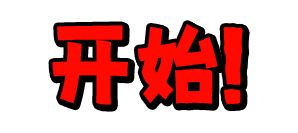
<style>
.page{position:relative;width:298px;height:133px;background:#ffffff}
.page>*{position:absolute;margin:0}
.t1{font:96.7px "NishikitekiBold-Regular";color:#ff0900;text-transform:uppercase}
.t2{font:105.6px "HouseofTerror";color:#ff0900;text-transform:uppercase}
</style>
<div class="page">
<p class="t1" style="left:52px;top:24px;width:191px;height:81px">开始<span class="t2">!</span></p>
</div>
